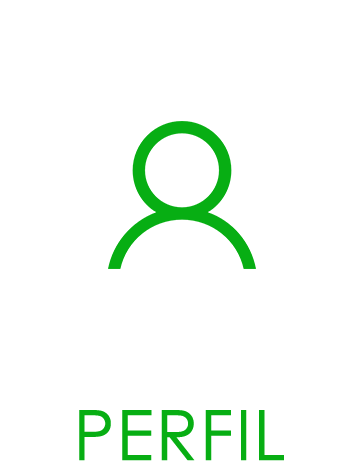
<style>
.page{position:relative;width:364px;height:472px;background:#ffffff}
.page>*{position:absolute;margin:0}
.t1{font:69.7px "CenturyGothic";color:#07ae13;font-weight:bold}
</style>
<div class="page">
<p class="t1" style="left:79px;top:410px;width:205px;height:51px">PERFIL</p>
</div>
